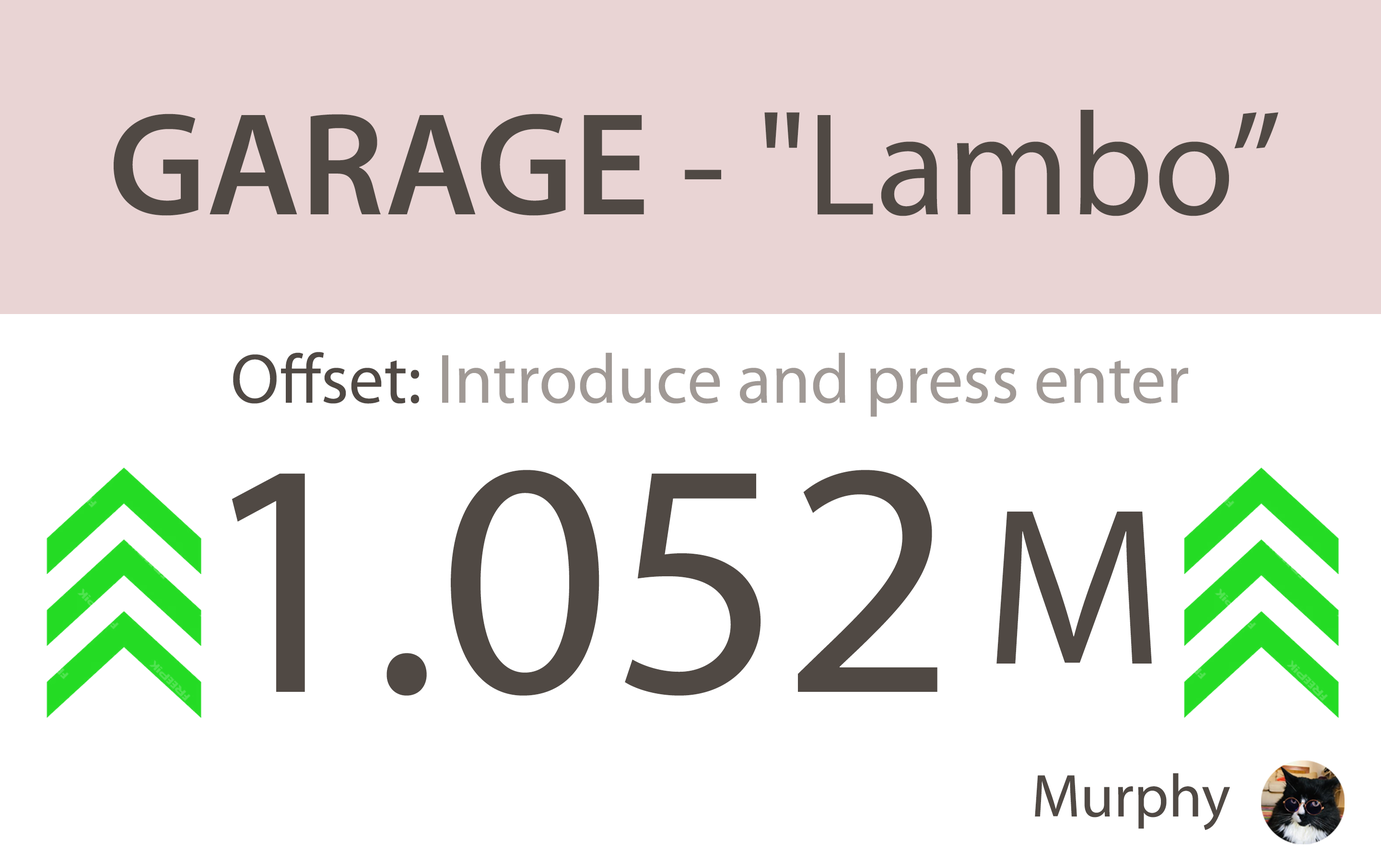
<style>
.page{position:relative;width:1381px;height:863px;background:#ffffff}
.page>*{position:absolute;margin:0}
.t1{font:147.2px "MyriadPro-Regular";color:#504944}
.t2{font:147.2px "MyriadPro-Semibold";color:#504944}
.t3{font:70.5px "MyriadPro-Regular";color:#a09995}
.t4{font:70.5px "MyriadPro-Regular";color:#504944}
.t5{font:335.7px "MyriadConceptRoman-Regular";color:#504944}
.t6{font:225.4px "MyriadConceptRoman-Regular";color:#504944}
.t7{font:60.9px "MyriadConceptRoman-Regular";color:#504944}
</style>
<div class="page">
<p class="t1" style="left:114px;top:110px;width:1165px;height:106px"><span class="t2">GARAGE</span> - "Lambo”</p>
<p class="t3" style="left:233px;top:352px;width:955px;height:65px"><span class="t4">Offset: </span>Introduce and press enter</p>
<p class="t5" style="left:232px;top:470px;width:706px;height:226px">1.052</p>
<p class="t6" style="left:997px;top:512px;width:155px;height:152px">M</p>
<p class="t7" style="left:1035px;top:773px;width:195px;height:58px">Murphy</p>
</div>
